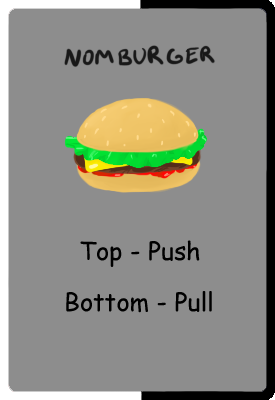
<style>
.page{position:relative;width:275px;height:400px;background:#8d8d8d}
.page>*{position:absolute;margin:0}
.t1{font:25px "ComicSansMS";color:#000000}
</style>
<div class="page">
<p class="t1" style="left:80px;top:240px;width:120px;height:27px">Top - Push</p>
<p class="t1" style="left:66px;top:291px;width:146px;height:22px">Bottom - Pull</p>
</div>
